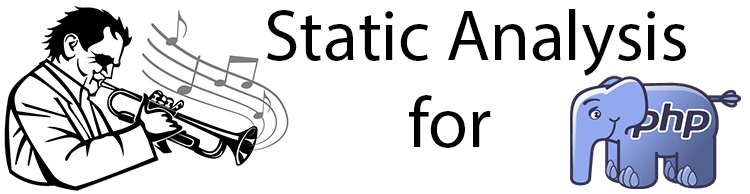
<style>
.page{position:relative;width:750px;height:194px;background:#ffffff}
.page>*{position:absolute;margin:0}
.t1{font:72px "MyriadPro-Regular";color:#000000}
</style>
<div class="page">
<p class="t1" style="left:267px;top:9px;width:419px;height:139px">Static Analysis<br>    for</p>
</div>
